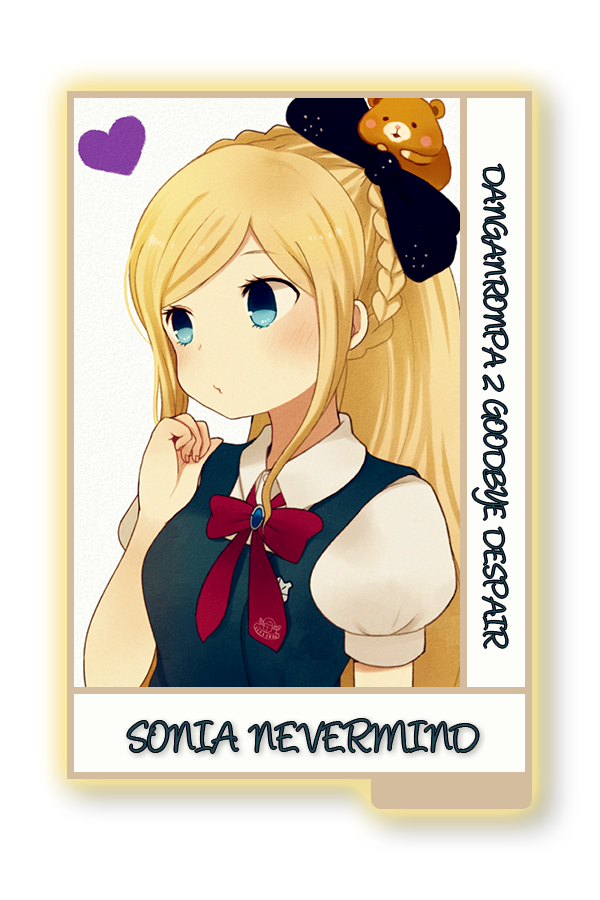
<style>
.page{position:relative;width:600px;height:900px;background:#ffffff}
.page>*{position:absolute;margin:0}
.t1{font:34.8px "Angelina";color:#23484e}
.t2{font:48.2px "Angelina";color:#23484e}
</style>
<div class="page">
<p class="t1" style="left:472px;top:164px;width:36px;height:484px;rotate:90deg">DANGANRONPA 2 GOODBYE DESPAIR</p>
<p class="t2" style="left:127px;top:719px;width:352px;height:34px">SONIA NEVERMIND</p>
</div>
